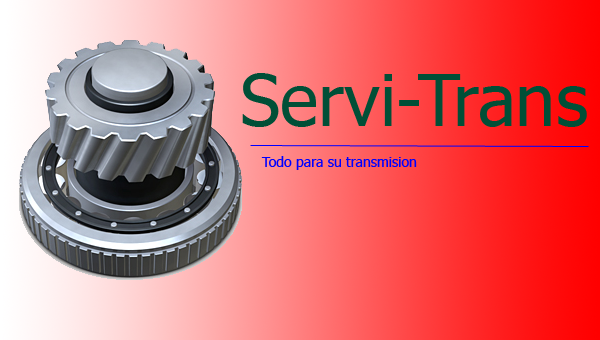
<style>
.page{position:relative;width:600px;height:340px}
.page>*{position:absolute;margin:0}
.t1{font:72px "Tahoma";color:#014f37}
.t2{font:14px "Tahoma";color:#0000ff}
</style>
<div class="page">
<p class="t1" style="left:242px;top:73px;width:345px;height:54px">Servi-Trans</p>
<p class="t2" style="left:261px;top:156px;width:156px;height:14px">Todo para su transmision</p>
</div>
